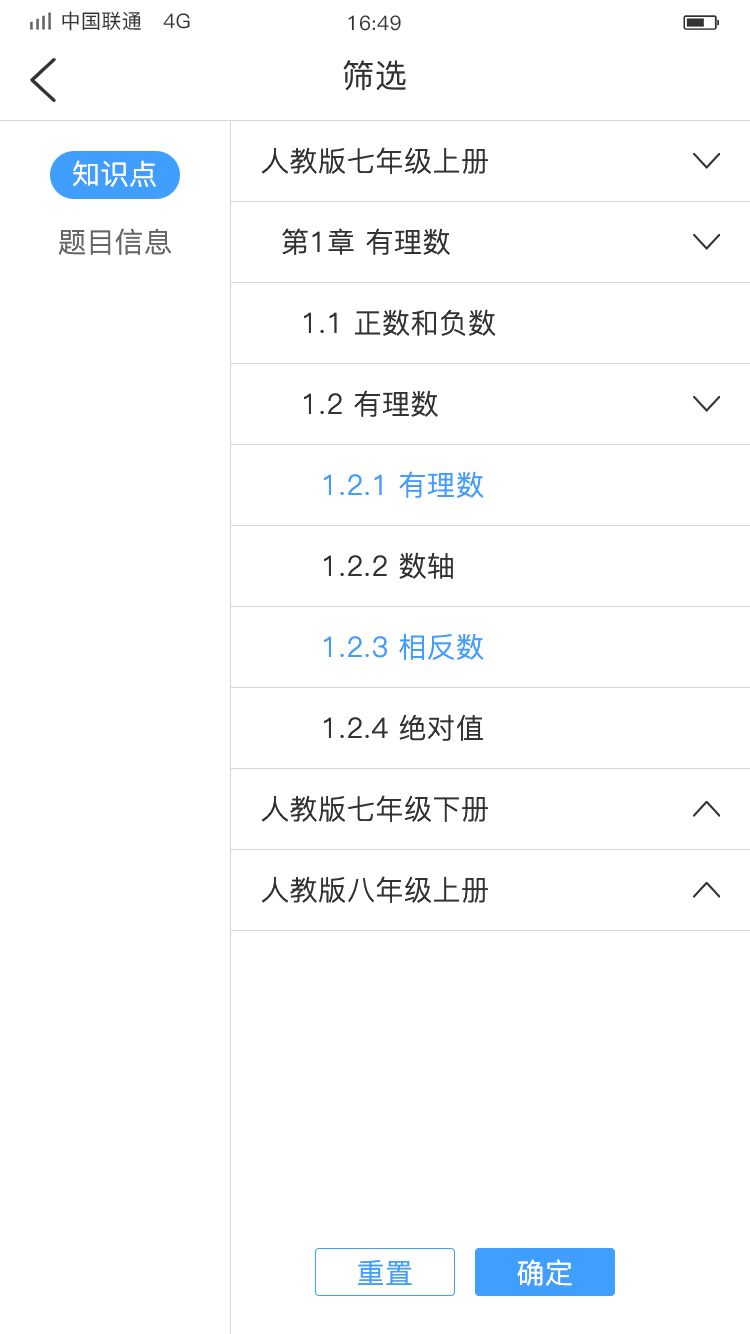
<style>
.page{position:relative;width:750px;height:1334px;background:#ffffff}
.page>*{position:absolute;margin:0}
.t1{font:20px "PingFang-SC-Medium";letter-spacing:0.02em;color:#333333}
.t2{font:32px "PingFang-SC-Regular";letter-spacing:0.02em;color:#333333}
.t3{font:28px "PingFang-SC-Regular";letter-spacing:0.02em;color:#333333}
.t4{font:28px "PingFang-SC-Regular";letter-spacing:0.02em;color:#ffffff}
.t5{font:28px "PingFang-SC-Regular";letter-spacing:0.02em;color:#666666}
.t6{font:28px "PingFang-SC-Regular";letter-spacing:0.02em;color:#409eff}
</style>
<div class="page">
<p class="t1" style="left:62px;top:11px;width:128px;height:20px">中国联通   4G</p>
<p class="t1" style="left:348px;top:15px;width:53px;height:16px">16:49</p>
<p class="t2" style="left:343px;top:60px;width:63px;height:31px">筛选</p>
<p class="t3" style="left:262px;top:147px;width:226px;height:27px">人教版七年级上册</p>
<p class="t4" style="left:73px;top:160px;width:83px;height:27px">知识点</p>
<p class="t5" style="left:58px;top:228px;width:113px;height:27px">题目信息</p>
<p class="t3" style="left:282px;top:228px;width:168px;height:27px">第1章 有理数</p>
<p class="t3" style="left:304px;top:309px;width:192px;height:27px">1.1 正数和负数</p>
<p class="t3" style="left:304px;top:390px;width:134px;height:27px">1.2 有理数</p>
<p class="t6" style="left:324px;top:471px;width:160px;height:27px">1.2.1 有理数</p>
<p class="t3" style="left:324px;top:552px;width:129px;height:27px">1.2.2 数轴</p>
<p class="t6" style="left:324px;top:633px;width:160px;height:27px">1.2.3 相反数</p>
<p class="t3" style="left:324px;top:714px;width:159px;height:27px">1.2.4 绝对值</p>
<p class="t3" style="left:262px;top:795px;width:226px;height:27px">人教版七年级下册</p>
<p class="t3" style="left:262px;top:876px;width:226px;height:27px">人教版八年级上册</p>
<p class="t6" style="left:358px;top:1260px;width:54px;height:25px">重置</p>
<p class="t4" style="left:517px;top:1259px;width:55px;height:27px">确定</p>
</div>
